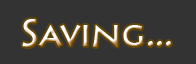
<style>
.page{position:relative;width:196px;height:64px;background:#333333}
.page>*{position:absolute;margin:0}
.t1{font:35px "Pericles"}
</style>
<div class="page">
<p class="t1" style="left:22px;top:19px;width:149px;height:28px">Saving...</p>
</div>
